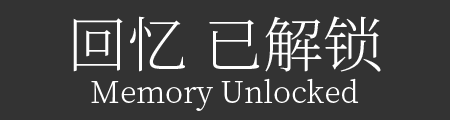
<style>
.page{position:relative;width:450px;height:120px;background:#333333}
.page>*{position:absolute;margin:0}
.t1{font:60px "SourceHanSerifCN-Light";color:#ffffff}
.t2{font:30px "SourceHanSerifCN-Light";color:#ffffff}
</style>
<div class="page">
<p class="t1" style="left:73px;top:16px;width:308px;height:56px">回忆 已解锁</p>
<p class="t2" style="left:91px;top:78px;width:268px;height:33px">Memory Unlocked</p>
</div>
